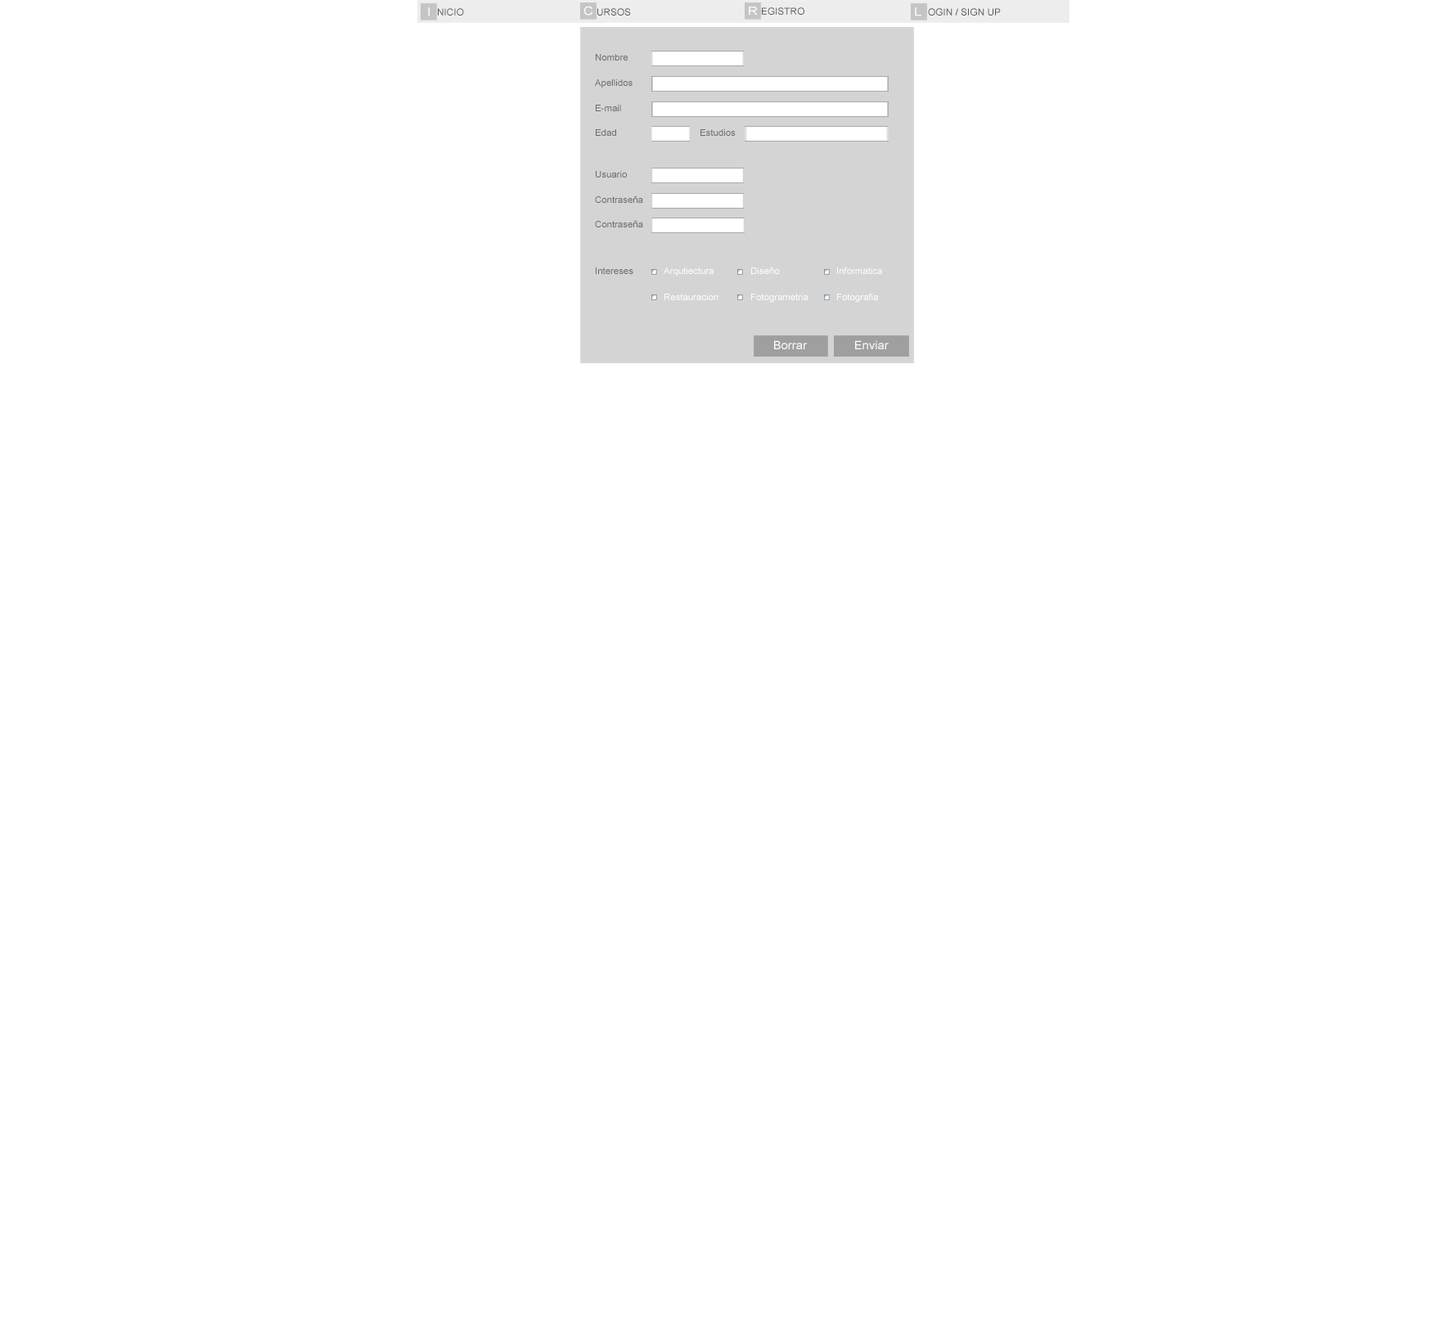
<style>
.page{position:relative;width:1432px;height:1335px;background:#ffffff}
.page>*{position:absolute;margin:0}
.t1{font:11.8px "ArialMT";color:#fffdfd;scale:1.15 1}
.t2{font:9.4px "ArialMT";color:#575656;scale:1.04 1}
.t3{font:9px "ArialMT";color:#6b6969;scale:1.04 1}
.t4{font:9px "ArialMT";color:#fffbfb;scale:1.04 1}
.t5{font:11.6px "ArialMT";color:#fff9f9;scale:1.05 1}
</style>
<div class="page">
<p class="t1" style="left:583px;top:6px;width:10px;height:10px">C</p>
<p class="t1" style="left:428px;top:7px;width:2px;height:9px">I</p>
<p class="t2" style="left:438px;top:8px;width:26px;height:8px">NICIO</p>
<p class="t2" style="left:597px;top:8px;width:34px;height:8px">URSOS</p>
<p class="t1" style="left:749px;top:7px;width:9px;height:9px">R</p>
<p class="t2" style="left:762px;top:7px;width:42px;height:8px">EGISTRO</p>
<p class="t1" style="left:915px;top:7px;width:6px;height:9px">L</p>
<p class="t2" style="left:928px;top:8px;width:73px;height:8px">OGIN / SIGN UP</p>
<p class="t3" style="left:596px;top:54px;width:32px;height:7px">Nombre</p>
<p class="t3" style="left:595px;top:79px;width:37px;height:9px">Apellidos</p>
<p class="t3" style="left:596px;top:105px;width:25px;height:6px">E-mail</p>
<p class="t3" style="left:596px;top:129px;width:20px;height:7px">Edad</p>
<p class="t3" style="left:700px;top:129px;width:36px;height:7px">Estudios</p>
<p class="t3" style="left:596px;top:171px;width:31px;height:7px">Usuario</p>
<p class="t3" style="left:595px;top:196px;width:48px;height:7px">Contraseña</p>
<p class="t3" style="left:595px;top:220px;width:48px;height:7px">Contraseña</p>
<p class="t3" style="left:596px;top:268px;width:37px;height:6px">Intereses</p>
<p class="t4" style="left:664px;top:268px;width:49px;height:9px">Arqutiectura</p>
<p class="t4" style="left:751px;top:267px;width:29px;height:7px">Diseño</p>
<p class="t4" style="left:837px;top:268px;width:45px;height:6px">Informatica</p>
<p class="t4" style="left:664px;top:294px;width:54px;height:6px">Restauracion</p>
<p class="t4" style="left:751px;top:294px;width:57px;height:9px">Fotogrametria</p>
<p class="t4" style="left:837px;top:294px;width:41px;height:9px">Fotografia</p>
<p class="t5" style="left:774px;top:340px;width:34px;height:9px">Borrar</p>
<p class="t5" style="left:855px;top:340px;width:34px;height:9px">Enviar</p>
</div>
